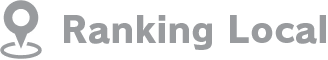
<style>
.page{position:relative;width:328px;height:60px;background:#ffffff}
.page>*{position:absolute;margin:0}
.t1{font:36px "RodinPro-EB";color:#999b9e}
</style>
<div class="page">
<p class="t1" style="left:64px;top:15px;width:262px;height:35px">Ranking Local</p>
</div>
